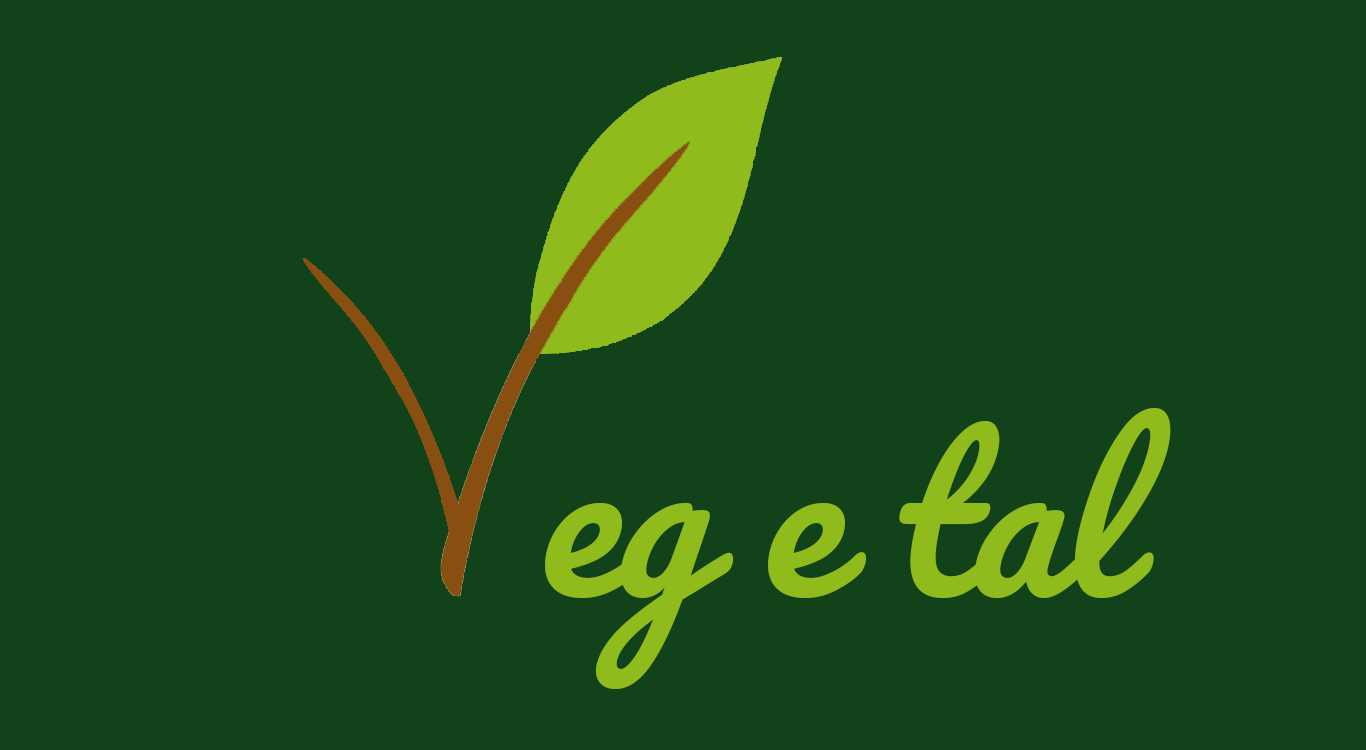
<style>
.page{position:relative;width:1366px;height:750px;background:#11421a}
.page>*{position:absolute;margin:0}
.t1{font:200px "Pacifico-Regular";letter-spacing:-0.005em;color:#8fbb1c;font-style:italic}
</style>
<div class="page">
<p class="t1" style="left:545px;top:407px;width:626px;height:282px">eg e tal</p>
</div>
